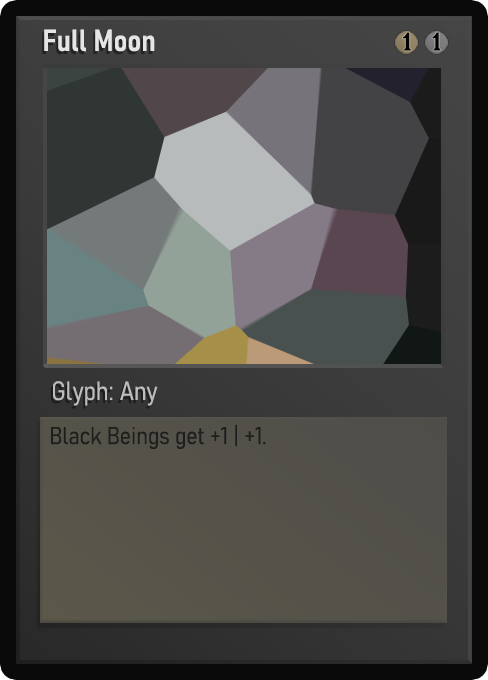
<style>
.page{position:relative;width:488px;height:680px}
.page>*{position:absolute;margin:0}
.t1{font:30px "Bahnschrift-SemiBoldSemiCondensed";color:#f2f2f2;font-weight:bold}
.t2{font:25px "WTRRoycroft";color:#000000;font-weight:bold;scale:1.09 1}
.t3{font:26px "Bahnschrift-LightSemiCondensed";color:#c8c8c8;font-weight:bold}
.t4{font:24px "Bahnschrift-LightSemiCondensed";color:#1e1e1e;font-weight:bold}
</style>
<div class="page">
<p class="t1" style="left:44px;top:29px;width:111px;height:23px;opacity:0.9">Full Moon</p>
<p class="t2" style="left:403px;top:32px;width:8px;height:19px">1</p>
<p class="t2" style="left:432px;top:32px;width:9px;height:19px">1</p>
<p class="t3" style="left:53px;top:381px;width:105px;height:25px;opacity:0.9">Glyph: Any</p>
<p class="t4" style="left:51px;top:424px;width:215px;height:25px">Black Beings get +1 | +1.</p>
</div>
